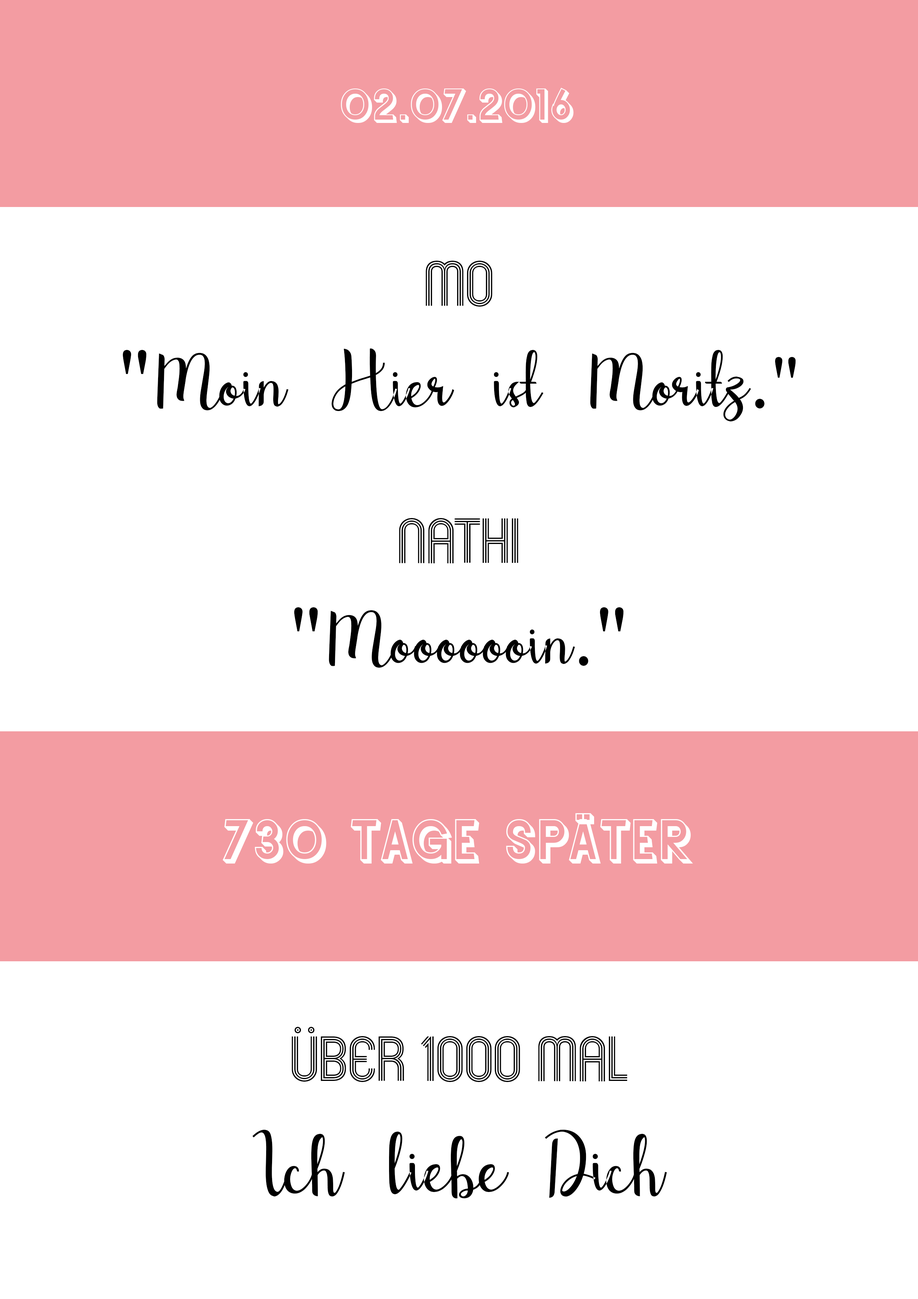
<style>
.page{position:relative;width:918px;height:1299px;background:#ffffff}
.page>*{position:absolute;margin:0}
.t1{font:43.2px "SFButtacupLetteringShaded";color:#ffffff}
.t2{font:84.8px "Shefilla-Regular";color:#000000}
.t3{font:55.5px "Mexcellent-Regular";color:#000000}
.t4{font:84.8px "TimesNewRomanPSMT";color:#000000}
.t5{font:74px "TimesNewRomanPSMT";color:#000000}
.t6{font:55.5px "SFButtacupLetteringShaded";color:#ffffff}
.t7{font:92.6px "Shefilla-Regular";color:#000000}
</style>
<div class="page">
<p class="t1" style="left:341px;top:88px;width:233px;height:35px">02.07.2016</p>
<p class="t2" style="left:123px;top:261px;width:673px;height:407px;text-align:center"><span class="t3">Mo<br></span><span class="t4">"</span>Moin Hier ist Moritz<span class="t4">.</span><span class="t5">"<br><br></span><span class="t3">Nathi<br></span>: <span class="t4">"</span>Mooooooin<span class="t4">."</span> ☺️</p>
<p class="t6" style="left:223px;top:813px;width:470px;height:50px">730 Tage Später</p>
<p class="t7" style="left:252px;top:1027px;width:415px;height:171px;text-align:center"><span class="t3">Über 1000 mal<br></span>"Ich liebe Dich“</p>
</div>
